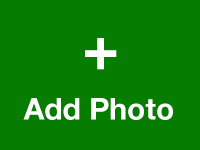
<style>
.page{position:relative;width:200px;height:150px;background:#067c00}
.page>*{position:absolute;margin:0}
.t1{font:62px "HelveticaNeue-Bold";color:#ffffff}
.t2{font:30px "HelveticaNeue-Bold";color:#ffffff}
</style>
<div class="page">
<p class="t1" style="left:85px;top:38px;width:32px;height:32px">+</p>
<p class="t2" style="left:23px;top:98px;width:150px;height:22px">Add Photo</p>
</div>
